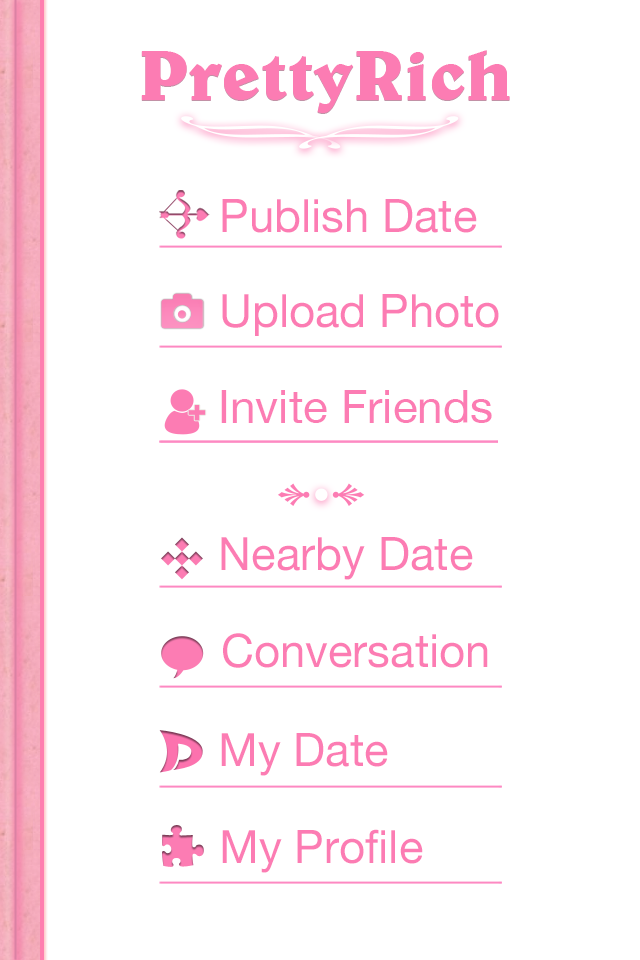
<style>
.page{position:relative;width:640px;height:960px;background:#ffffff}
.page>*{position:absolute;margin:0}
.t1{font:72px "BelweBT-Bold";color:#fc7cb3}
.t2{font:46px "HelveticaNeue";color:#fc7cb3}
</style>
<div class="page">
<p class="t1" style="left:141px;top:50px;width:369px;height:63px">PrettyRich</p>
<p class="t2" style="left:222px;top:199px;width:255px;height:34px">Publish Date</p>
<p class="t2" style="left:222px;top:294px;width:277px;height:42px">Upload Photo</p>
<p class="t2" style="left:221px;top:390px;width:271px;height:33px">Invite Friends</p>
<p class="t2" style="left:221px;top:537px;width:252px;height:43px">Nearby Date</p>
<p class="t2" style="left:223px;top:633px;width:265px;height:35px">Conversation</p>
<p class="t2" style="left:221px;top:733px;width:167px;height:43px">My Date</p>
<p class="t2" style="left:222px;top:829px;width:201px;height:44px">My Profile</p>
</div>
